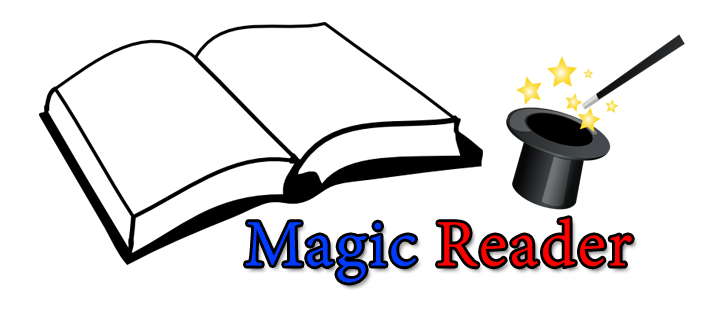
<style>
.page{position:relative;width:728px;height:312px;background:#ffffff}
.page>*{position:absolute;margin:0}
.t1{font:72px "AdobeDevanagari-Regular";letter-spacing:0.025em;color:#ff0000}
.t2{font:72px "AdobeDevanagari-Regular";letter-spacing:0.025em;color:#003cff}
</style>
<div class="page">
<p class="t1" style="left:246px;top:218px;width:386px;height:65px"><span class="t2">Magic </span>Reader</p>
</div>
